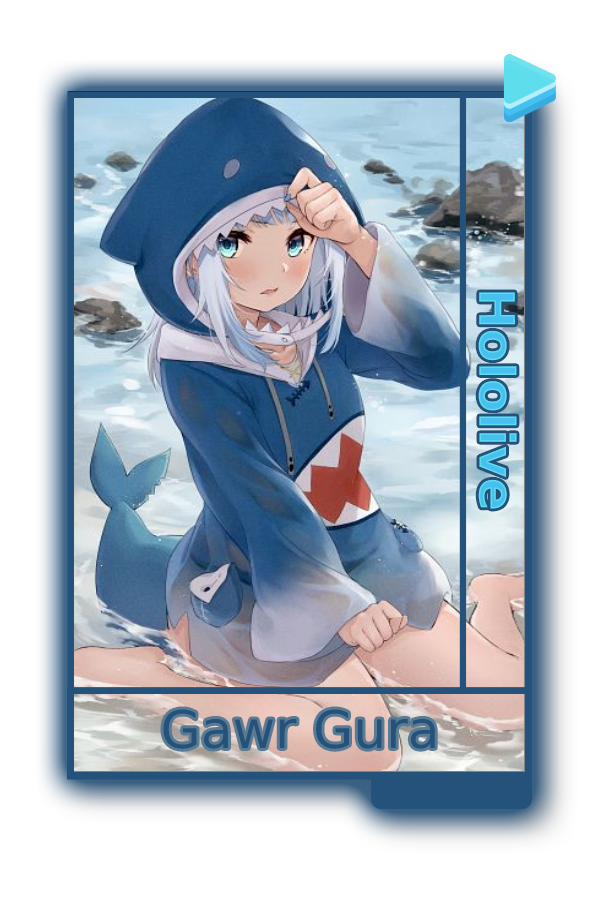
<style>
.page{position:relative;width:600px;height:900px;background:#ffffff}
.page>*{position:absolute;margin:0}
.t1{font:48.8px "MADETOMMY-Bold";color:#45c0f0}
.t2{font:52px "CoolveticaRg-Regular";color:#25527b}
</style>
<div class="page">
<p class="t1" style="left:478px;top:292px;width:39px;height:217px;rotate:90deg">Hololive</p>
<p class="t2" style="left:163px;top:709px;width:272px;height:40px">Gawr Gura</p>
</div>
